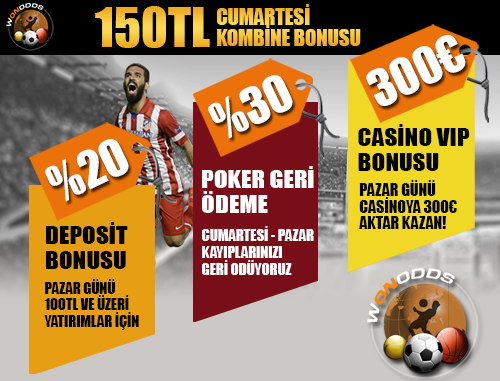
<style>
.page{position:relative;width:500px;height:381px}
.page>*{position:absolute;margin:0}
.t1{font:50.3px "Impact";text-transform:uppercase}
.t2{font:20.6px/13.9px "Impact";color:#f6c23a;text-transform:uppercase}
.t3{font:47px "Impact";color:#ffffff;text-transform:uppercase}
.t4{font:22.5px/23px "Impact";color:#000000;text-transform:uppercase;scale:1.12 1}
.t5{font:22.5px/23px "Impact";color:#ffffff;text-transform:uppercase;scale:1.12 1}
.t6{font:15.8px/15.4px "Impact";color:#000000;text-transform:uppercase}
.t7{font:14.6px/15.4px "Impact";color:#ffffff;text-transform:uppercase}
.t8{font:14.6px/15.4px "Impact";color:#000000;text-transform:uppercase}
</style>
<div class="page">
<p class="t1" style="left:95px;top:6px;width:115px;height:42px">150tl</p>
<p class="t2" style="left:217px;top:4px;width:144px;height:42px">CUMARTESİ<br>kombİne bonusu</p>
<p class="t3" style="left:366px;top:35px;width:100px;height:71px;rotate:-26deg">300€</p>
<p class="t3" style="left:208px;top:75px;width:85px;height:64px;rotate:-26deg">%30</p>
<p class="t4" style="left:358px;top:124px;width:112px;height:47px">casİNO VIP<br>BONUSU</p>
<p class="t3" style="left:45px;top:139px;width:84px;height:63px;rotate:-26deg">%20</p>
<p class="t5" style="left:202px;top:166px;width:112px;height:47px">POKER GERİ<br>ÖDEME</p>
<p class="t6" style="left:359px;top:180px;width:98px;height:49px">PAZAR GÜNÜ<br>CASİNOYA 300€<br>AKTAR KAZAN!</p>
<p class="t4" style="left:46px;top:222px;width:82px;height:47px">DEPOSİT <br>BONUSU</p>
<p class="t7" style="left:202px;top:226px;width:112px;height:49px">CUMARTESİ - PAZAR<br>KAYIPLARINIZI<br>GERİ ODÜYORUZ</p>
<p class="t8" style="left:44px;top:279px;width:95px;height:51px">pazar günü<br>100TL VE ÜZERİ<br>YATIRIMLAR İÇİN</p>
</div>
